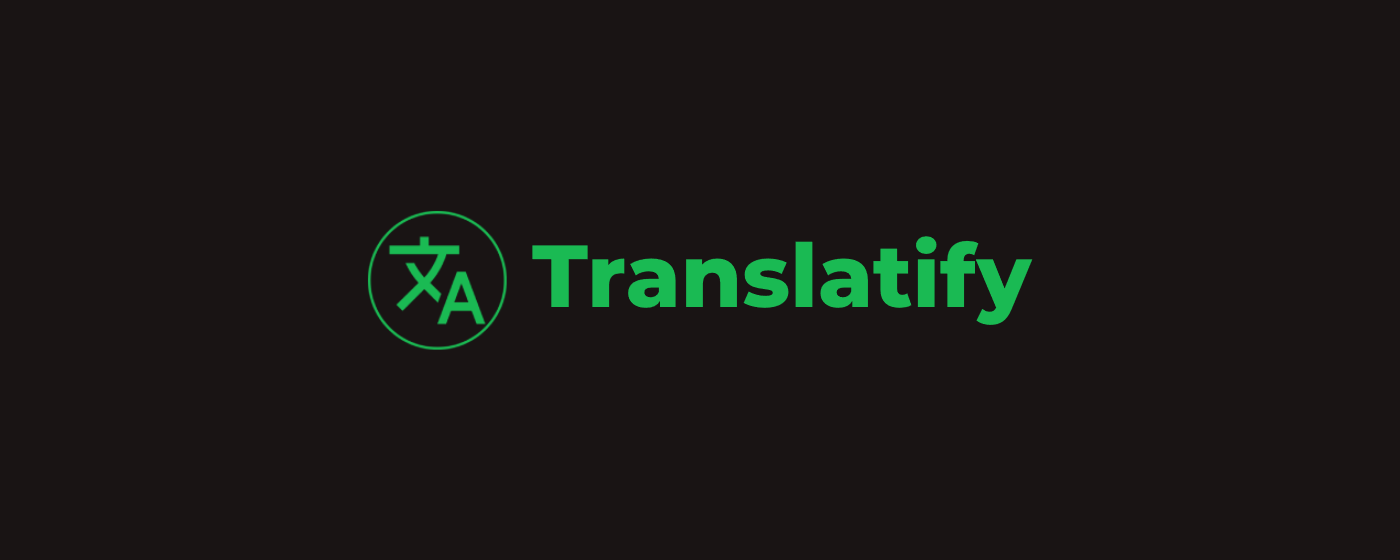
<style>
.page{position:relative;width:1400px;height:560px;background:#191414}
.page>*{position:absolute;margin:0}
.t1{font:88.1px "Montserrat-ExtraBold";color:#1aba53}
</style>
<div class="page">
<p class="t1" style="left:532px;top:236px;width:501px;height:89px">Translatify</p>
</div>
